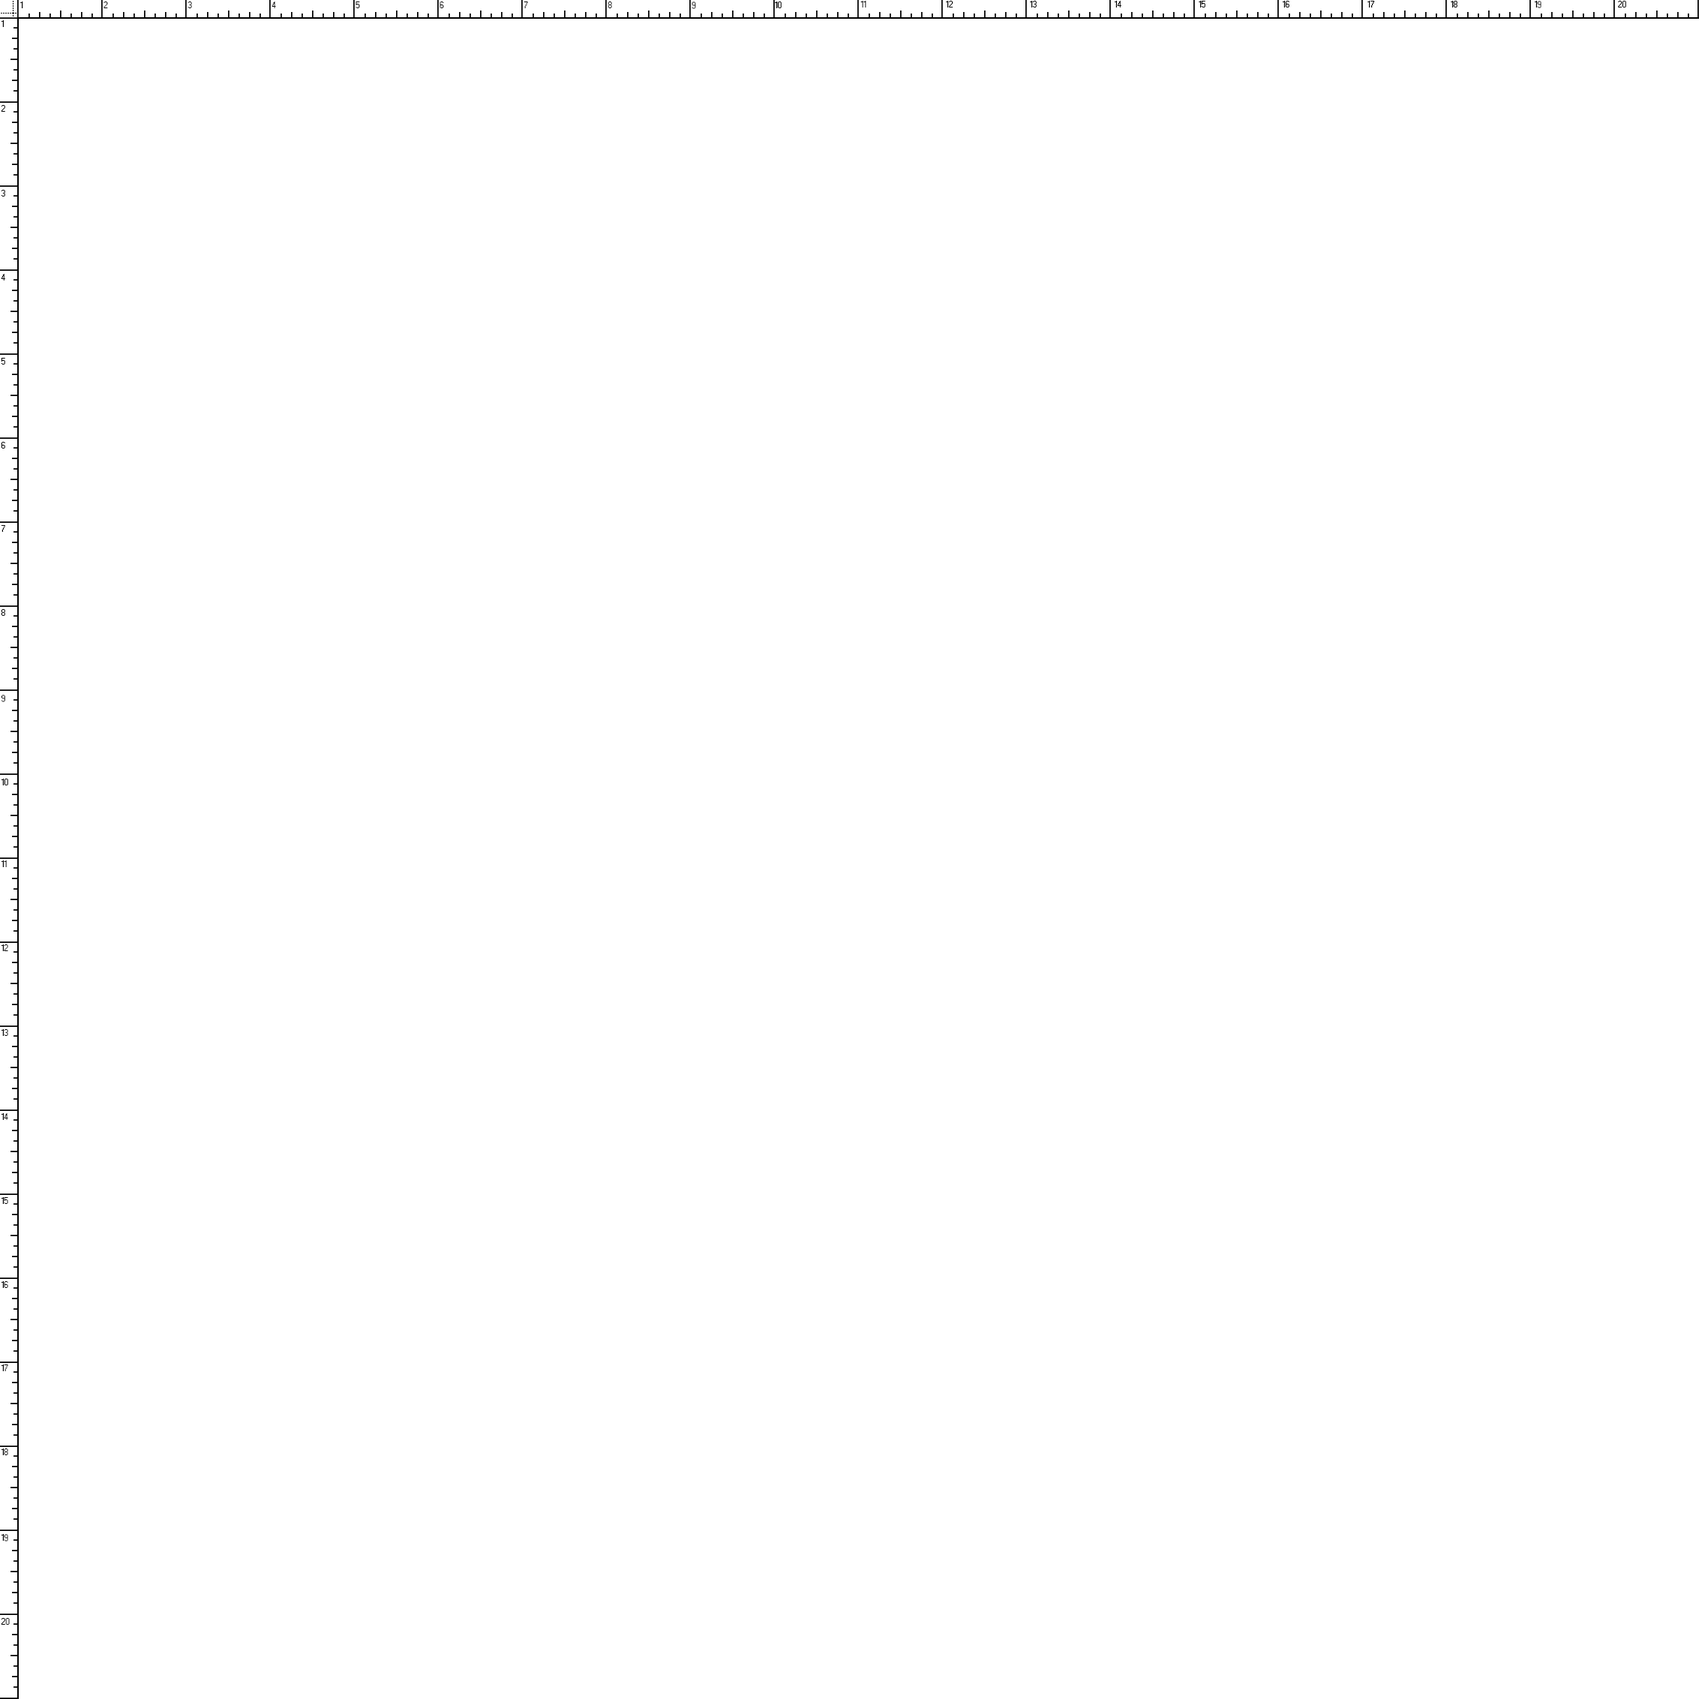
<style>
.page{position:relative;width:1699px;height:1699px;background:#ffffff}
.page>*{position:absolute;margin:0}
.t1{font:9px "Windows";color:#000000}
</style>
<div class="page">
<p class="t1" style="left:860px;top:1px;width:6px;height:7px">11</p>
<p class="t1" style="left:946px;top:1px;width:7px;height:7px">12</p>
<p class="t1" style="left:1030px;top:1px;width:7px;height:7px">13</p>
<p class="t1" style="left:1114px;top:1px;width:7px;height:7px">14</p>
<p class="t1" style="left:1199px;top:1px;width:6px;height:7px">15</p>
<p class="t1" style="left:1282px;top:1px;width:7px;height:7px">16</p>
<p class="t1" style="left:1367px;top:1px;width:8px;height:7px">17</p>
<p class="t1" style="left:1451px;top:1px;width:6px;height:7px">18</p>
<p class="t1" style="left:1534px;top:1px;width:7px;height:7px">19</p>
<p class="t1" style="left:1618px;top:1px;width:8px;height:7px">20</p>
<p class="t1" style="left:1px;top:20px;width:3px;height:7px">1</p>
<p class="t1" style="left:1px;top:105px;width:4px;height:7px">2</p>
<p class="t1" style="left:1px;top:190px;width:4px;height:7px">3</p>
<p class="t1" style="left:1px;top:274px;width:4px;height:7px">4</p>
<p class="t1" style="left:1px;top:358px;width:4px;height:7px">5</p>
<p class="t1" style="left:1px;top:442px;width:4px;height:7px">6</p>
<p class="t1" style="left:1px;top:525px;width:4px;height:7px">7</p>
<p class="t1" style="left:1px;top:609px;width:4px;height:7px">8</p>
<p class="t1" style="left:1px;top:695px;width:4px;height:7px">9</p>
<p class="t1" style="left:1px;top:779px;width:7px;height:6px">10</p>
<p class="t1" style="left:1px;top:860px;width:6px;height:7px">11</p>
<p class="t1" style="left:1px;top:944px;width:7px;height:7px">12</p>
<p class="t1" style="left:1px;top:1029px;width:7px;height:7px">13</p>
<p class="t1" style="left:1px;top:1113px;width:7px;height:7px">14</p>
<p class="t1" style="left:1px;top:1197px;width:7px;height:7px">15</p>
<p class="t1" style="left:1px;top:1281px;width:7px;height:7px">16</p>
<p class="t1" style="left:1px;top:1364px;width:7px;height:7px">17</p>
<p class="t1" style="left:1px;top:1448px;width:7px;height:7px">18</p>
<p class="t1" style="left:1px;top:1534px;width:7px;height:7px">19</p>
<p class="t1" style="left:1px;top:1618px;width:9px;height:7px">20</p>
</div>
